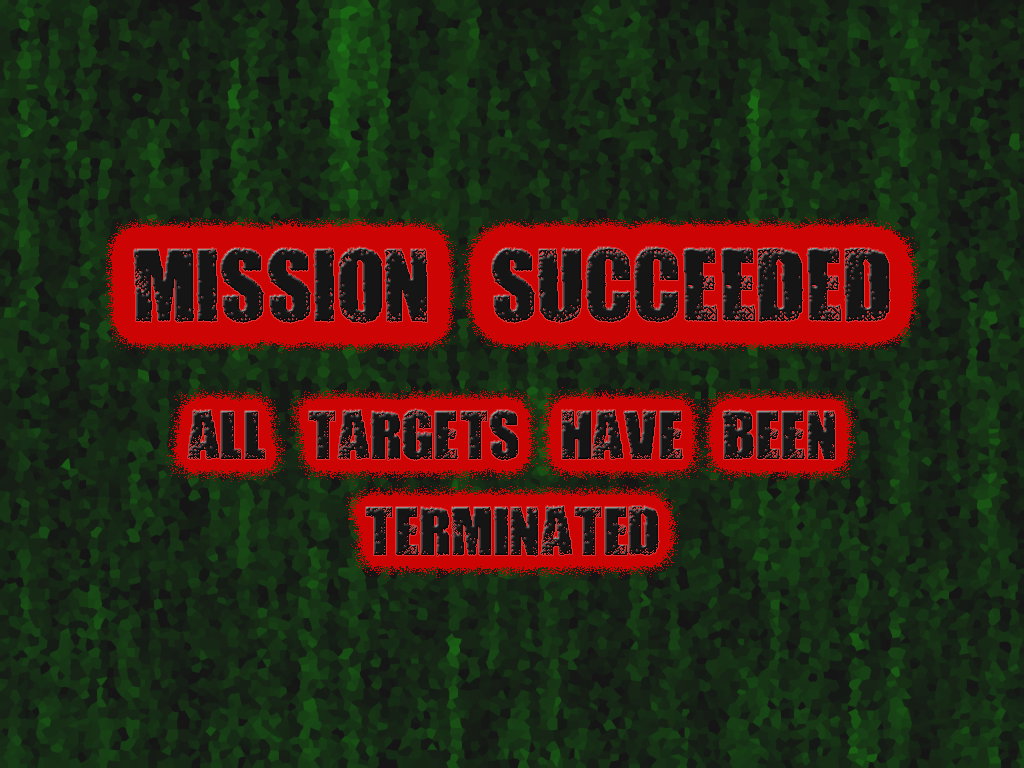
<style>
.page{position:relative;width:1024px;height:768px}
.page>*{position:absolute;margin:0}
.t1{font:120px "DIRTYBAGBOLDTRIAL";color:#151515}
.t2{font:80px "DIRTYBAGBOLDTRIAL";color:#151515}
</style>
<div class="page">
<p class="t1" style="left:134px;top:247px;width:756px;height:76px">Mission Succeeded</p>
<p class="t2" style="left:188px;top:409px;width:647px;height:147px;text-align:center">All targets have been<br>terminated</p>
</div>
